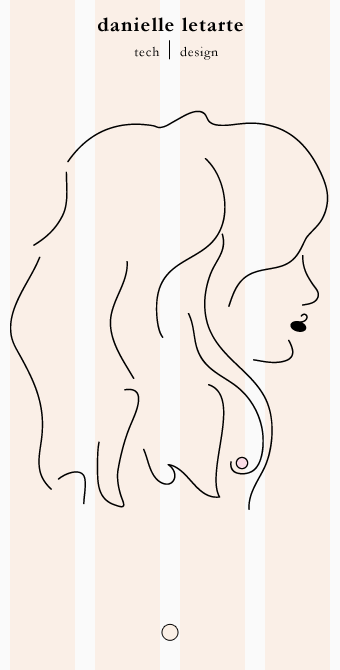
<style>
.page{position:relative;width:340px;height:670px;background:#faefe7}
.page>*{position:absolute;margin:0}
.t1{font:21px "Garamond-Bold";letter-spacing:0.05em;color:#010101}
.t2{font:21px "Garamond";letter-spacing:0.05em;color:#010101}
.t3{font:14px "Garamond";letter-spacing:0.05em;color:#010101}
</style>
<div class="page">
<p class="t1" style="left:98px;top:17px;width:145px;height:15px">danielle letarte</p>
<p class="t2" style="left:169px;top:40px;width:1px;height:20px">|</p>
<p class="t3" style="left:134px;top:46px;width:26px;height:11px">tech</p>
<p class="t3" style="left:180px;top:46px;width:38px;height:14px">design</p>
</div>
